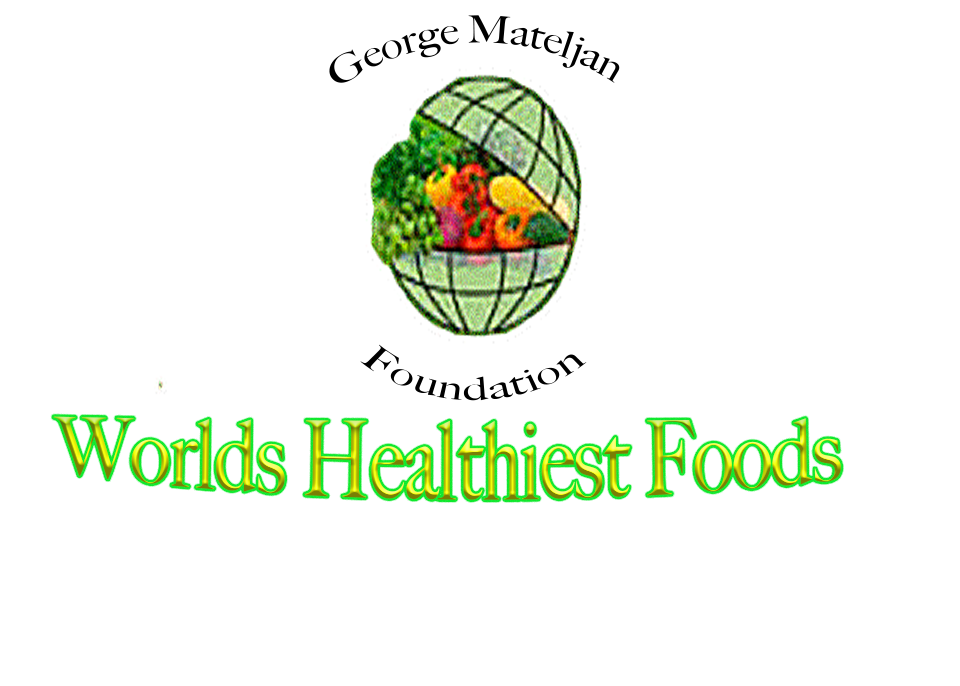
<style>
.page{position:relative;width:960px;height:686px;background:#ffffff}
.page>*{position:absolute;margin:0}
.t1{font:38px "BigCaslon-Medium";color:#000000;scale:0.97 1}
.t2{font:32.8px "BigCaslon-Medium";color:#000000;scale:1.16 1}
.t3{font:77.1px "BigCaslon-Medium"}
</style>
<div class="page">
<p class="t1" style="left:329px;top:15px;width:291px;height:68px">George Mateljan</p>
<p class="t2" style="left:360px;top:344px;width:227px;height:57px">Foundation</p>
<p class="t3" style="left:53px;top:416px;width:788px;height:84px">Worlds Healthiest Foods</p>
</div>
